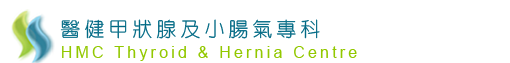
<style>
.page{position:relative;width:510px;height:63px;background:#ffffff}
.page>*{position:absolute;margin:0}
.t1{font:20px "HanWangYenLight";letter-spacing:0.2em;color:#006984}
.t2{font:16px "ArialMT";letter-spacing:0.2em;color:#92c800}
</style>
<div class="page">
<p class="t1" style="left:60px;top:19px;width:260px;height:20px">醫健甲狀腺及小腸氣專科</p>
<p class="t2" style="left:62px;top:46px;width:295px;height:15px">HMC Thyroid &amp; Hernia Centre</p>
</div>
